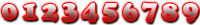
<style>
.page{position:relative;width:200px;height:25px}
.page>*{position:absolute;margin:0}
.t1{font:25.6px "CooperBlackStd";letter-spacing:0.125em}
</style>
<div class="page">
<p class="t1" style="left:2px;top:4px;width:15px;height:15px">0</p>
<p class="t1" style="left:42px;top:4px;width:15px;height:17px">2</p>
<p class="t1" style="left:81px;top:2px;width:16px;height:20px">4</p>
<p class="t1" style="left:103px;top:3px;width:14px;height:18px">5</p>
<p class="t1" style="left:123px;top:3px;width:15px;height:17px">6</p>
<p class="t1" style="left:162px;top:3px;width:15px;height:17px">8</p>
<p class="t1" style="left:183px;top:3px;width:15px;height:19px">9</p>
</div>
